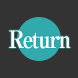
<style>
.page{position:relative;width:78px;height:78px;background:#333333}
.page>*{position:absolute;margin:0}
.t1{font:24px "RyuminPro-ExBold";letter-spacing:-0.08em;color:#fefefe;scale:0.9 1}
</style>
<div class="page">
<p class="t1" style="left:9px;top:30px;width:62px;height:19px">Return</p>
</div>
